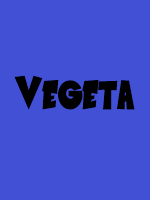
<style>
.page{position:relative;width:150px;height:200px;background:#4250d5}
.page>*{position:absolute;margin:0}
.t1{font:48px "SaiyanSans";color:#000000}
</style>
<div class="page">
<p class="t1" style="left:14px;top:75px;width:121px;height:35px">Vegeta</p>
</div>
